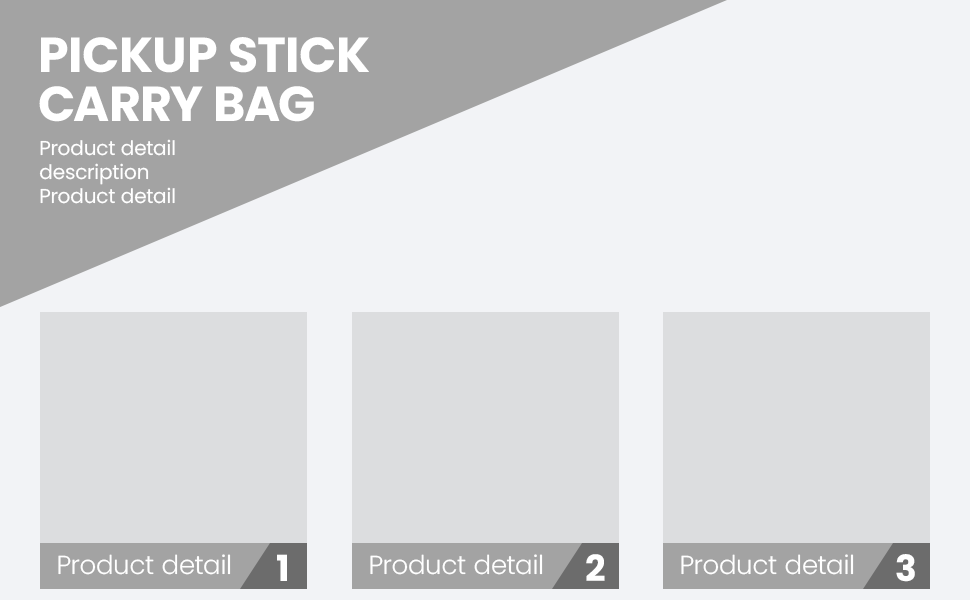
<style>
.page{position:relative;width:970px;height:600px;background:#f2f3f6}
.page>*{position:absolute;margin:0}
.t1{font:49px/49px "Poppins-Bold";color:#ffffff;text-transform:uppercase}
.t2{font:20px "Poppins-Regular";color:#ffffff}
.t3{font:26px "Poppins-Light";color:#ffffff}
.t4{font:36px "Poppins-Bold";color:#ffffff}
</style>
<div class="page">
<p class="t1" style="left:39px;top:37px;width:330px;height:85px">PICKUP STICK<br>CARRY BAG</p>
<p class="t2" style="left:39px;top:139px;width:136px;height:65px">Product detail<br>description<br>Product detail</p>
<p class="t3" style="left:58px;top:554px;width:173px;height:21px">Product detail</p>
<p class="t4" style="left:277px;top:554px;width:10px;height:27px">1</p>
<p class="t3" style="left:370px;top:554px;width:173px;height:21px">Product detail</p>
<p class="t4" style="left:586px;top:554px;width:19px;height:27px">2</p>
<p class="t3" style="left:681px;top:554px;width:173px;height:21px">Product detail</p>
<p class="t4" style="left:896px;top:554px;width:19px;height:28px">3</p>
</div>
